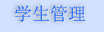
<style>
.page{position:relative;width:104px;height:32px;background:#d1e1ff}
.page>*{position:absolute;margin:0}
.t1{font:18px "SimSun";color:#1a66fd}
</style>
<div class="page">
<p class="t1" style="left:15px;top:5px;width:71px;height:17px">学生管理</p>
</div>
